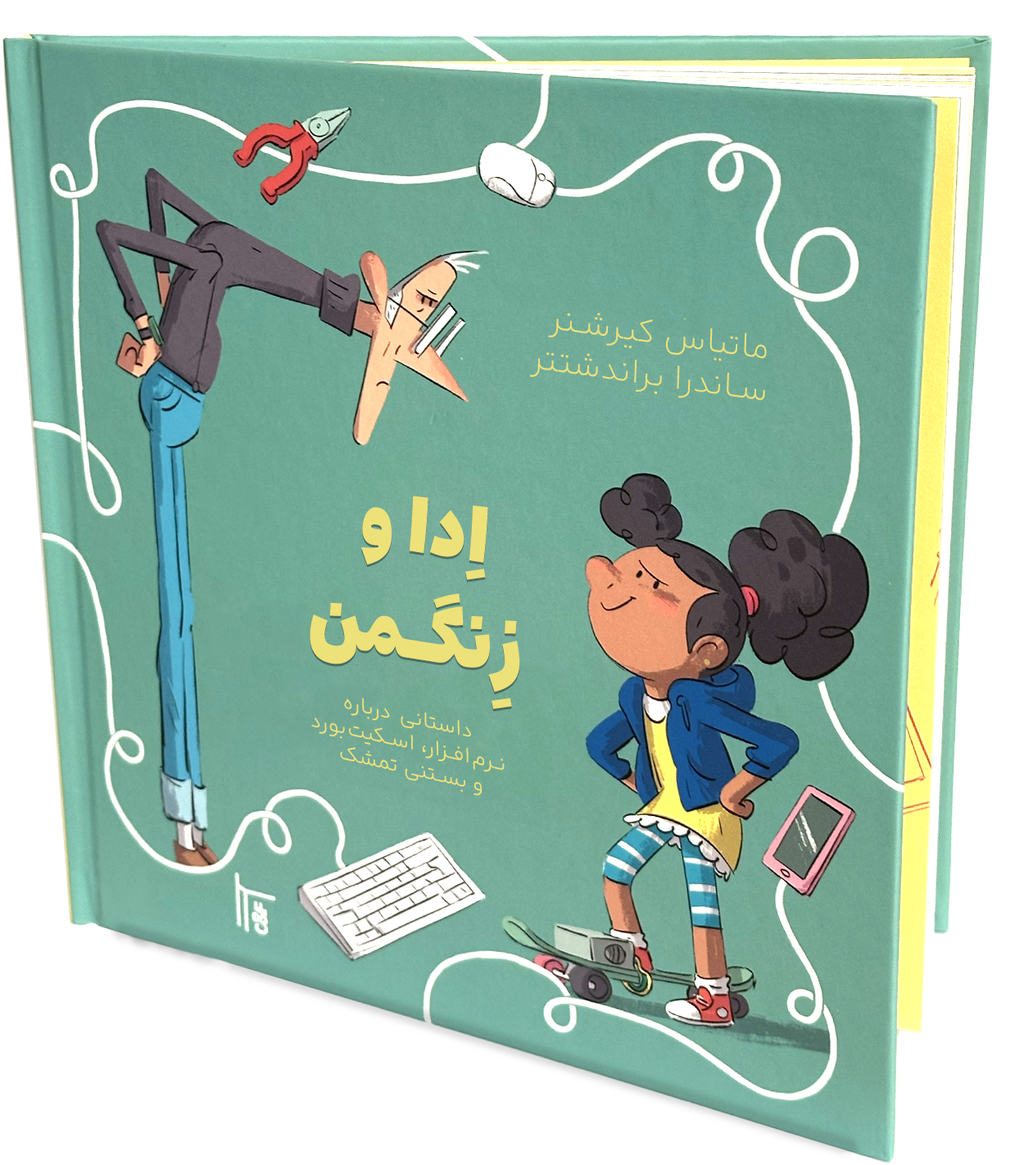
<style>
.page{position:relative;width:1024px;height:1165px;background:#ffffff}
.page>*{position:absolute;margin:0}
.t1{font:34.9px "AradFD-ExtraLight";letter-spacing:0.04em;color:#ede17a;scale:0.96 1}
.t2{font:75.2px/106.2px "EstedadMad-Fat";letter-spacing:0.04em;color:#ede17a;scale:0.88 1}
.t3{font:21.5px "AradFD-LightDots2";letter-spacing:0.04em;color:#ede17a}
</style>
<div class="page">
<p class="t1" style="left:530px;top:313px;width:237px;height:88px;text-align:right;rotate:8deg">ماتیاس کیرشنر<br>ساندرا براندشتتر</p>
<p class="t2" style="left:310px;top:496px;width:210px;height:213px;text-align:center;rotate:9deg">اِدا و<br>زِنگـمن</p>
<p class="t3" style="left:311px;top:698px;width:194px;height:97px;text-align:center;rotate:13deg">داستانی درباره <br>نـرم‌افـزار، اسکیت‌بورد <br>و بستنی تمشک</p>
</div>
